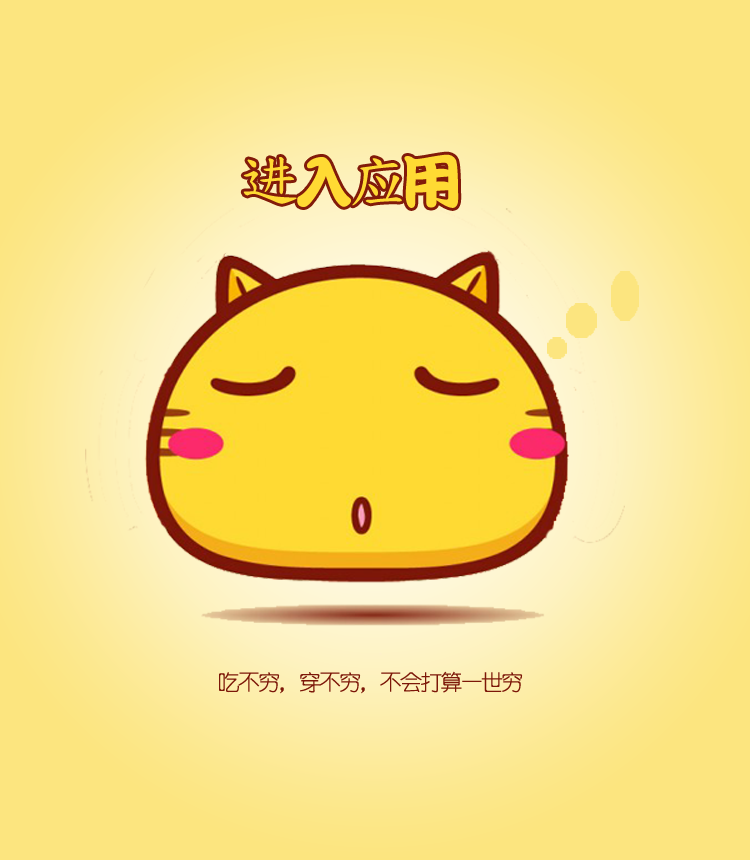
<style>
.page{position:relative;width:750px;height:860px}
.page>*{position:absolute;margin:0}
.t1{font:59px "DFKaiShu-SB-Estd-BF";letter-spacing:-0.1em;color:#ffda33}
.t2{font:59px "DFKanTingLiu-XB-HKP-BF";letter-spacing:-0.1em;color:#ffda33}
.t3{font:22.1px "YouYuan";letter-spacing:-0.1em;color:#7c1708}
</style>
<div class="page">
<p class="t1" style="left:243px;top:154px;width:216px;height:54px">进<span class="t2">入</span>应<span class="t2">用</span></p>
<p class="t3" style="left:219px;top:671px;width:304px;height:23px">吃不穷，穿不穷，不会打算一世穷</p>
</div>
